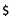
<style>
.page{position:relative;width:16px;height:16px;background:#ffffff}
.page>*{position:absolute;margin:0}
.t1{font:14px "MyriadPro-Regular";color:#030000}
</style>
<div class="page">
<p class="t1" style="left:3px;top:4px;width:6px;height:13px">$</p>
</div>
